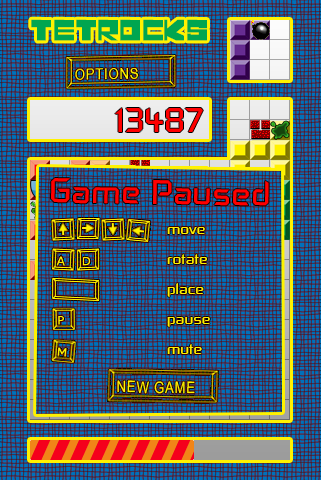
<style>
.page{position:relative;width:321px;height:480px}
.page>*{position:absolute;margin:0}
.t1{font:41.6px "LeningradDisco";color:#00a650;text-transform:uppercase}
.t2{font:40px "ControlFreak";color:#ff0000;text-transform:uppercase}
.t3{font:40px "ControlFreak";color:#ff0000}
.t4{font:18px/30px "ControlFreak";color:#fff200}
</style>
<div class="page">
<p class="t1" style="left:31px;top:19px;width:176px;height:22px">Tetrocks</p>
<p class="t2" style="left:115px;top:108px;width:88px;height:24px">13487</p>
<p class="t3" style="left:51px;top:178px;width:218px;height:28px;rotate:1deg">Game Paused</p>
<p class="t4" style="left:167px;top:227px;width:43px;height:127px">move<br>rotate<br>place<br>pause<br>mute</p>
</div>
